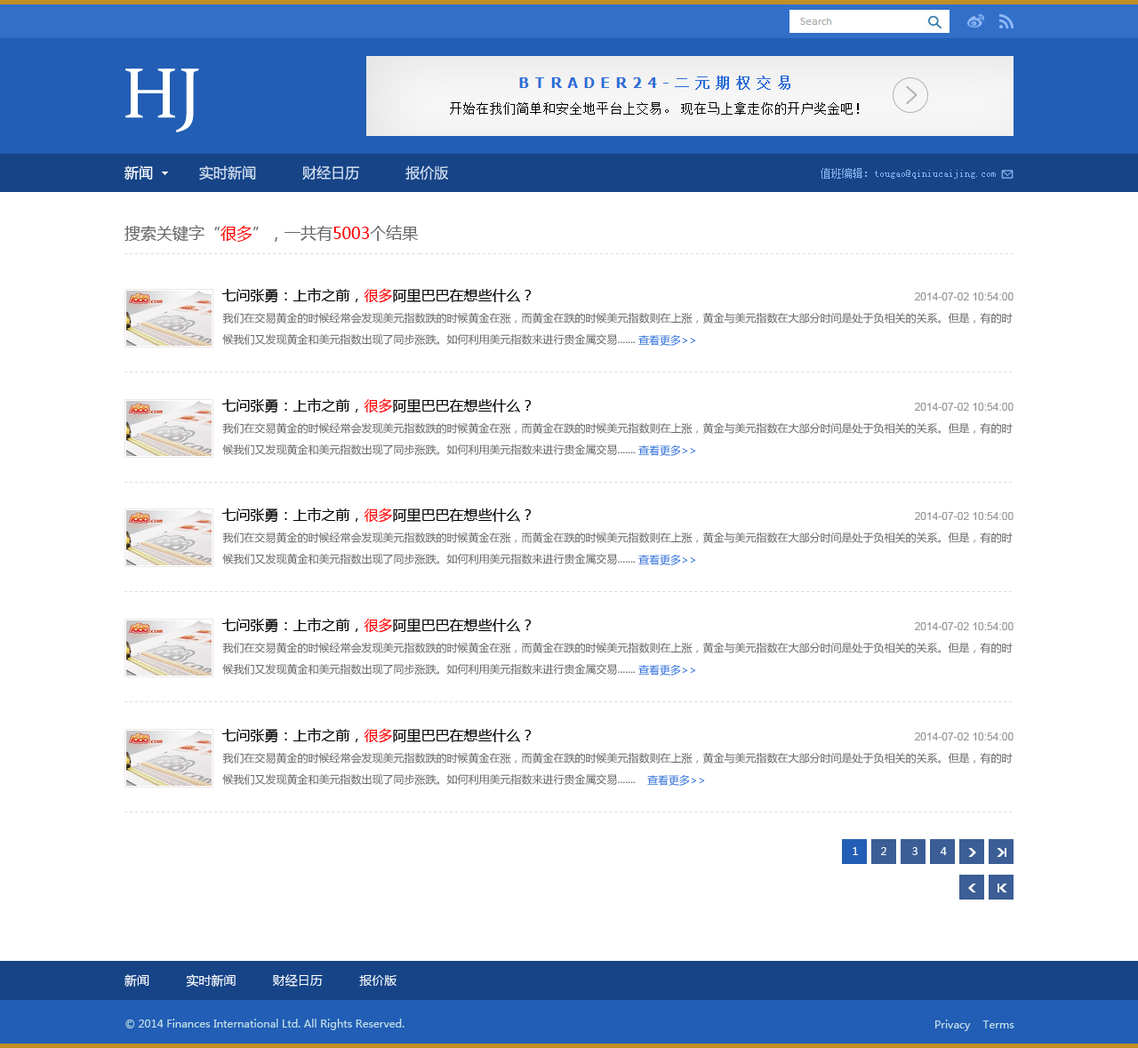
<style>
.page{position:relative;width:1138px;height:1048px;background:#ffffff}
.page>*{position:absolute;margin:0}
.t1{font:71.1px "Constantia";color:#ffffff}
.t2{font:14.2px "MicrosoftYaHei";color:#d1ddee}
.t3{font:14.2px "MicrosoftYaHei";color:#ffffff}
.t4{font:10.7px "SimSun";color:#84afec}
.t5{font:16px "MicrosoftYaHei";color:#666666}
.t6{font:16px "MicrosoftYaHei";color:#ff0000}
.t7{font:14.2px "MicrosoftYaHei";color:#000000}
.t8{font:14.2px "MicrosoftYaHei";color:#ff0000}
.t9{font:10.7px "ArialMT";color:#999999}
.t10{font:10.7px/21.3px "MicrosoftYaHei";color:#666666}
.t11{font:10.7px "MicrosoftYaHei";color:#2d6ed8}
.t12{font:10.7px "MicrosoftYaHei";color:#ffffff}
.t13{font:12.4px "MicrosoftYaHei";color:#ffffff}
.t14{font:10.7px "MicrosoftYaHei";color:#c1dee8}
</style>
<div class="page">
<p class="t1" style="left:125px;top:68px;width:74px;height:64px">HJ</p>
<p class="t2" style="left:124px;top:165px;width:325px;height:15px"><span class="t3">新闻</span>           实时新闻           财经日历           报价版</p>
<p class="t4" style="left:820px;top:168px;width:176px;height:11px">值班编辑：tougao@qiniucaijing.com</p>
<p class="t5" style="left:124px;top:225px;width:295px;height:17px">搜索关键字“<span class="t6">很多</span>”，一共有<span class="t6">5003</span>个结果</p>
<p class="t7" style="left:221px;top:288px;width:310px;height:15px">七问张勇：上市之前，<span class="t8">很多</span>阿里巴巴在想些什么？</p>
<p class="t9" style="left:915px;top:292px;width:98px;height:8px">2014-07-02 10:54:00</p>
<p class="t10" style="left:222px;top:312px;width:790px;height:33px">我们在交易黄金的时候经常会发现美元指数跌的时候黄金在涨，而黄金在跌的时候美元指数则在上涨，黄金与美元指数在大部分时间是处于负相关的关系。但是，有的时候我们又发现黄金和美元指数出现了同步涨跌。如何利用美元指数来进行贵金属交易.......</p>
<p class="t11" style="left:638px;top:335px;width:58px;height:11px">查看更多&gt;&gt;</p>
<p class="t7" style="left:221px;top:398px;width:310px;height:15px">七问张勇：上市之前，<span class="t8">很多</span>阿里巴巴在想些什么？</p>
<p class="t9" style="left:915px;top:403px;width:98px;height:8px">2014-07-02 10:54:00</p>
<p class="t10" style="left:222px;top:422px;width:790px;height:33px">我们在交易黄金的时候经常会发现美元指数跌的时候黄金在涨，而黄金在跌的时候美元指数则在上涨，黄金与美元指数在大部分时间是处于负相关的关系。但是，有的时候我们又发现黄金和美元指数出现了同步涨跌。如何利用美元指数来进行贵金属交易.......</p>
<p class="t11" style="left:638px;top:445px;width:58px;height:11px">查看更多&gt;&gt;</p>
<p class="t7" style="left:221px;top:508px;width:310px;height:15px">七问张勇：上市之前，<span class="t8">很多</span>阿里巴巴在想些什么？</p>
<p class="t9" style="left:915px;top:512px;width:98px;height:8px">2014-07-02 10:54:00</p>
<p class="t10" style="left:222px;top:532px;width:790px;height:32px">我们在交易黄金的时候经常会发现美元指数跌的时候黄金在涨，而黄金在跌的时候美元指数则在上涨，黄金与美元指数在大部分时间是处于负相关的关系。但是，有的时候我们又发现黄金和美元指数出现了同步涨跌。如何利用美元指数来进行贵金属交易.......</p>
<p class="t11" style="left:638px;top:555px;width:58px;height:10px">查看更多&gt;&gt;</p>
<p class="t7" style="left:221px;top:618px;width:310px;height:15px">七问张勇：上市之前，<span class="t8">很多</span>阿里巴巴在想些什么？</p>
<p class="t9" style="left:915px;top:622px;width:98px;height:8px">2014-07-02 10:54:00</p>
<p class="t10" style="left:222px;top:642px;width:790px;height:33px">我们在交易黄金的时候经常会发现美元指数跌的时候黄金在涨，而黄金在跌的时候美元指数则在上涨，黄金与美元指数在大部分时间是处于负相关的关系。但是，有的时候我们又发现黄金和美元指数出现了同步涨跌。如何利用美元指数来进行贵金属交易.......</p>
<p class="t11" style="left:638px;top:665px;width:58px;height:11px">查看更多&gt;&gt;</p>
<p class="t7" style="left:221px;top:728px;width:310px;height:15px">七问张勇：上市之前，<span class="t8">很多</span>阿里巴巴在想些什么？</p>
<p class="t9" style="left:915px;top:732px;width:98px;height:8px">2014-07-02 10:54:00</p>
<p class="t10" style="left:222px;top:752px;width:790px;height:33px">我们在交易黄金的时候经常会发现美元指数跌的时候黄金在涨，而黄金在跌的时候美元指数则在上涨，黄金与美元指数在大部分时间是处于负相关的关系。但是，有的时候我们又发现黄金和美元指数出现了同步涨跌。如何利用美元指数来进行贵金属交易.......</p>
<p class="t11" style="left:647px;top:775px;width:58px;height:11px">查看更多&gt;&gt;</p>
<p class="t12" style="left:852px;top:847px;width:95px;height:8px">1       2        3       4</p>
<p class="t13" style="left:124px;top:974px;width:273px;height:14px">新闻          实时新闻          财经日历          报价版</p>
<p class="t14" style="left:125px;top:1019px;width:279px;height:11px">© 2014 Finances International Ltd. All Rights Reserved.</p>
<p class="t14" style="left:935px;top:1020px;width:79px;height:11px">Privacy    Terms</p>
</div>
